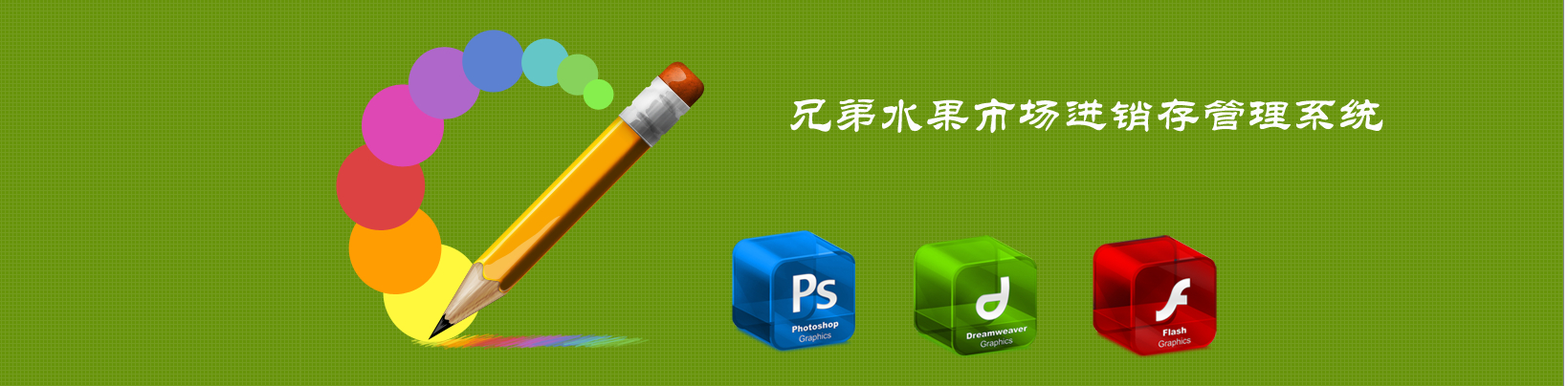
<style>
.page{position:relative;width:1568px;height:386px}
.page>*{position:absolute;margin:0}
.t1{font:45.9px "STLiti";color:#fcfcfc}
</style>
<div class="page">
<p class="t1" style="left:790px;top:99px;width:593px;height:35px">兄弟水果市场进销存管理系统</p>
</div>
